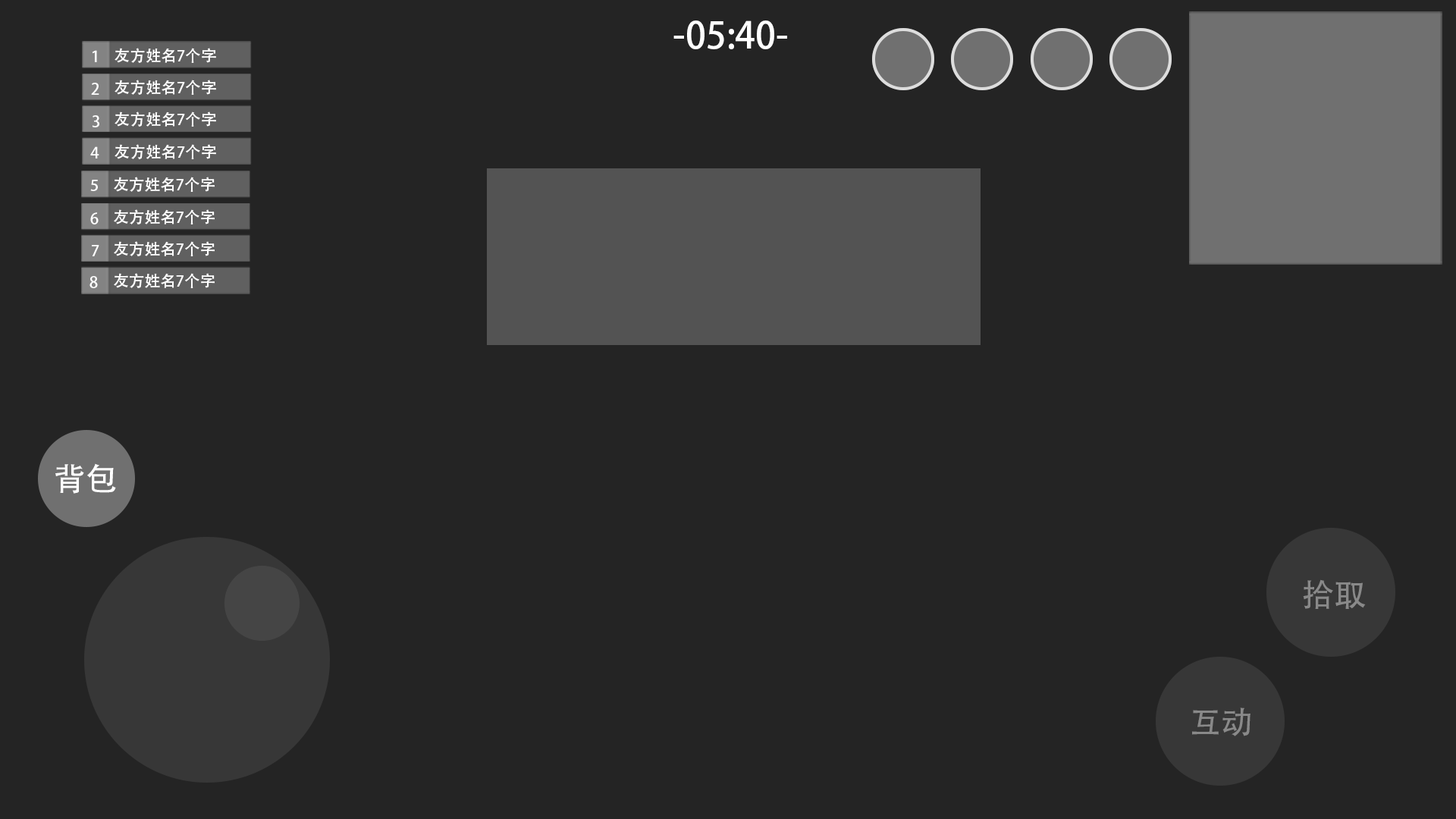
<style>
.page{position:relative;width:1456px;height:819px;background:#242424}
.page>*{position:absolute;margin:0}
.t1{font:36.4px "AdobeHeitiStd-Regular";color:#ffffff}
.t2{font:15.6px "AdobeHeitiStd-Regular";color:#ffffff}
.t3{font:31.8px "AdobeHeitiStd-Regular";color:#ffffff}
.t4{font:31.8px "AdobeHeitiStd-Regular";color:#898989}
</style>
<div class="page">
<p class="t1" style="left:673px;top:20px;width:114px;height:29px">-05:40-</p>
<p class="t2" style="left:92px;top:50px;width:5px;height:12px">1</p>
<p class="t2" style="left:115px;top:48px;width:101px;height:15px">友方姓名7个字</p>
<p class="t2" style="left:91px;top:83px;width:8px;height:12px">2</p>
<p class="t2" style="left:115px;top:80px;width:101px;height:15px">友方姓名7个字</p>
<p class="t2" style="left:115px;top:111px;width:101px;height:16px">友方姓名7个字</p>
<p class="t2" style="left:92px;top:115px;width:7px;height:12px">3</p>
<p class="t2" style="left:90px;top:146px;width:9px;height:12px">4</p>
<p class="t2" style="left:115px;top:144px;width:101px;height:15px">友方姓名7个字</p>
<p class="t2" style="left:90px;top:180px;width:8px;height:11px">5</p>
<p class="t2" style="left:114px;top:177px;width:101px;height:15px">友方姓名7个字</p>
<p class="t2" style="left:114px;top:209px;width:101px;height:15px">友方姓名7个字</p>
<p class="t2" style="left:90px;top:212px;width:9px;height:12px">6</p>
<p class="t2" style="left:92px;top:245px;width:7px;height:11px">7</p>
<p class="t2" style="left:114px;top:241px;width:101px;height:15px">友方姓名7个字</p>
<p class="t2" style="left:89px;top:276px;width:9px;height:12px">8</p>
<p class="t2" style="left:114px;top:273px;width:101px;height:15px">友方姓名7个字</p>
<p class="t3" style="left:55px;top:463px;width:61px;height:31px">背包</p>
<p class="t4" style="left:1303px;top:579px;width:63px;height:30px">拾取</p>
<p class="t4" style="left:1192px;top:708px;width:58px;height:28px">互动</p>
</div>
